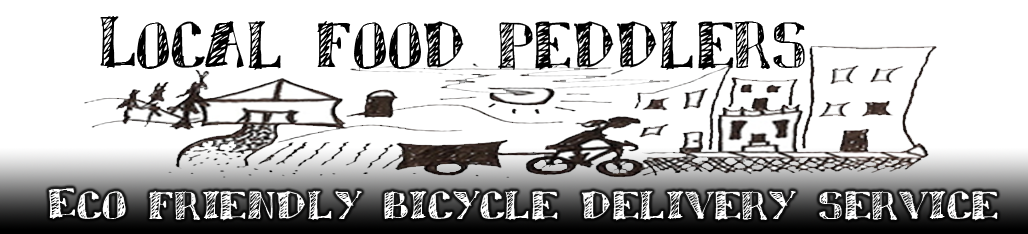
<style>
.page{position:relative;width:1028px;height:234px;background:#ffffff}
.page>*{position:absolute;margin:0}
.t1{font:68.8px "Sketchy-Regular";color:#000000;scale:0.91 1}
.t2{font:41px "Sketchy-Regular";color:#ffffff;scale:1.1 1}
.t3{font:52.9px "Sketchy-Regular";color:#ffffff}
</style>
<div class="page">
<p class="t1" style="left:100px;top:16px;width:705px;height:54px">Local food peddlers</p>
<p class="t2" style="left:48px;top:188px;width:950px;height:33px"><span class="t3"><br></span><br>Eco friendly bicycle delivery service</p>
</div>
